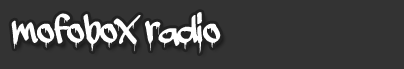
<style>
.page{position:relative;width:404px;height:69px;background:#333333}
.page>*{position:absolute;margin:0}
.t1{font:48px "adrippingmarker";color:#ffffff}
</style>
<div class="page">
<p class="t1" style="left:11px;top:12px;width:210px;height:42px">mofobox radio</p>
</div>
